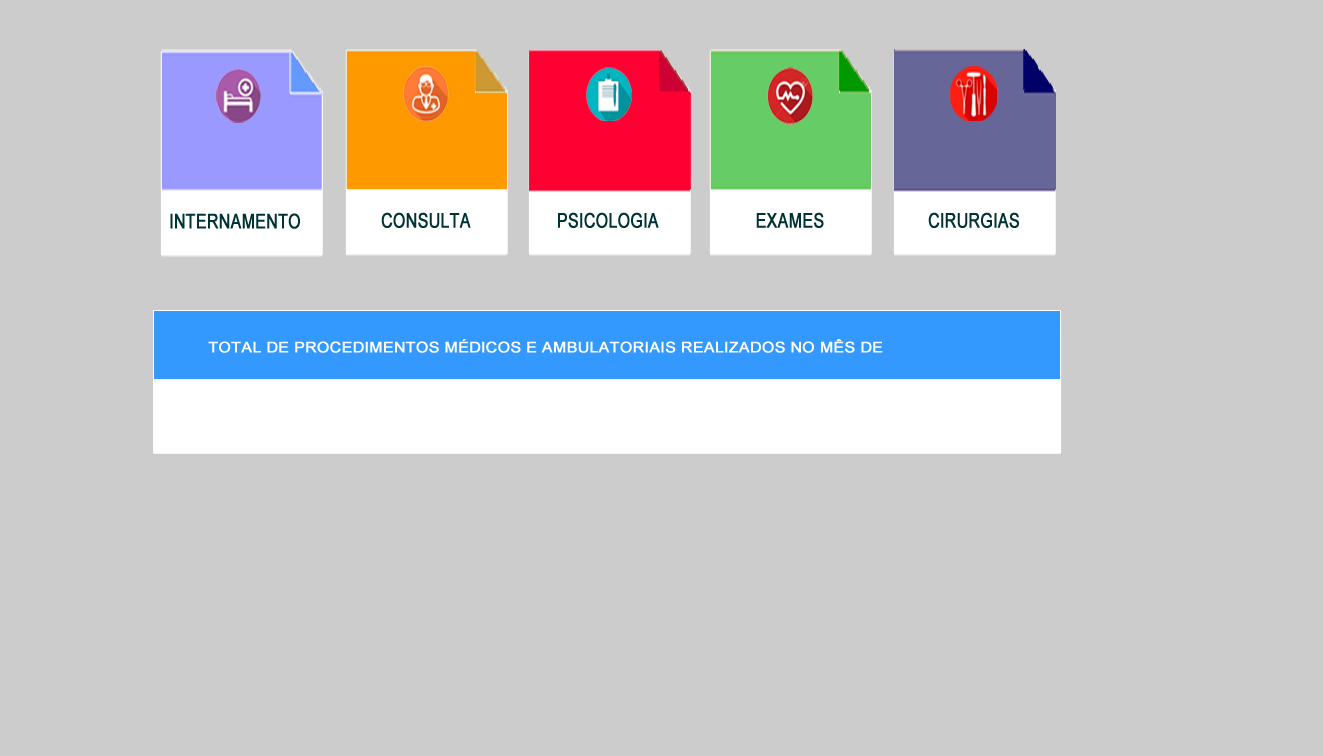
<style>
.page{position:relative;width:1323px;height:756px;background:#cccccc}
.page>*{position:absolute;margin:0}
.t1{font:20.3px "ArialMT";color:#003333;font-weight:bold;scale:0.78 1}
.t2{font:14.5px "ArialMT";color:#ffffff;font-weight:bold;scale:1.09 1}
</style>
<div class="page">
<p class="t1" style="left:170px;top:213px;width:130px;height:16px">INTERNAMENTO</p>
<p class="t1" style="left:381px;top:212px;width:90px;height:16px">CONSULTA</p>
<p class="t1" style="left:558px;top:212px;width:101px;height:16px">PSICOLOGIA</p>
<p class="t1" style="left:756px;top:212px;width:68px;height:16px">EXAMES</p>
<p class="t1" style="left:928px;top:212px;width:91px;height:16px">CIRURGIAS</p>
<p class="t2" style="left:208px;top:339px;width:675px;height:14px">TOTAL DE PROCEDIMENTOS MÉDICOS E AMBULATORIAIS REALIZADOS NO MÊS DE</p>
</div>
